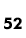
<style>
.page{position:relative;width:26px;height:38px;background:#ffffff}
.page>*{position:absolute;margin:0}
.t1{font:18px "Futura-Bold";letter-spacing:-0.06em;color:#000000}
</style>
<div class="page">
<p class="t1" style="left:4px;top:17px;width:18px;height:13px">52</p>
</div>
